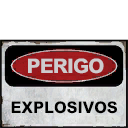
<style>
.page{position:relative;width:128px;height:128px;background:#ffffff}
.page>*{position:absolute;margin:0}
.t1{font:20px "MHeiPRC-Xbold";letter-spacing:-0.04em;color:#cecbce}
.t2{font:16px "MHeiPRC-Xbold";color:#000000}
</style>
<div class="page">
<p class="t1" style="left:28px;top:58px;width:76px;height:16px">PERIGO</p>
<p class="t2" style="left:11px;top:101px;width:106px;height:13px">EXPLOSIVOS</p>
</div>
